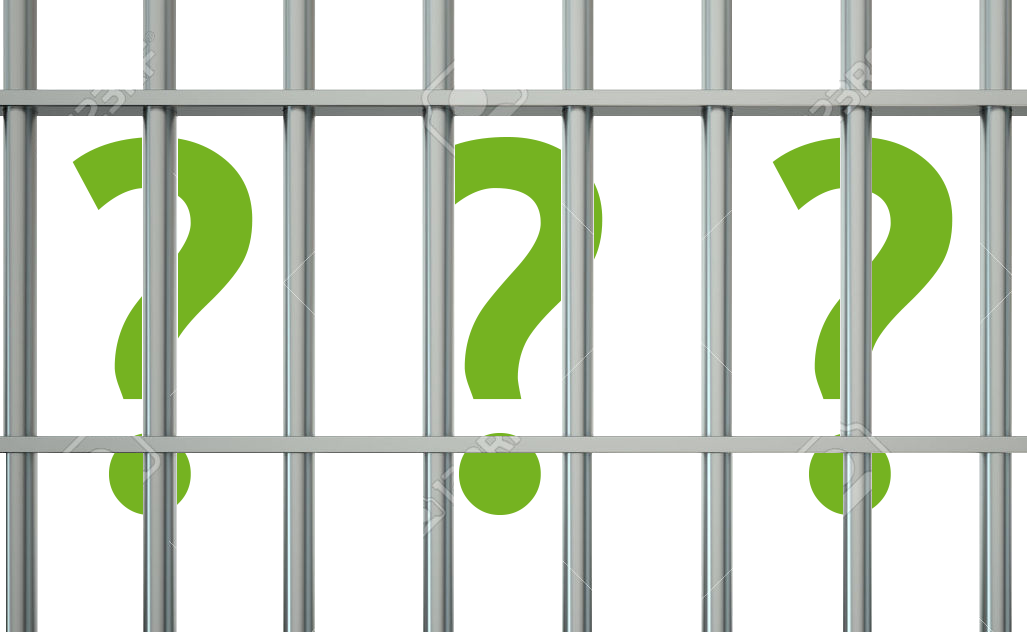
<style>
.page{position:relative;width:1027px;height:632px;background:#ffffff}
.page>*{position:absolute;margin:0}
.t1{font:512px "TrebuchetMS-Bold";letter-spacing:-0.05em;color:#75b321}
</style>
<div class="page">
<p class="t1" style="left:72px;top:137px;width:181px;height:378px">?</p>
<p class="t1" style="left:422px;top:137px;width:181px;height:378px">?</p>
<p class="t1" style="left:772px;top:137px;width:181px;height:378px">?</p>
</div>
